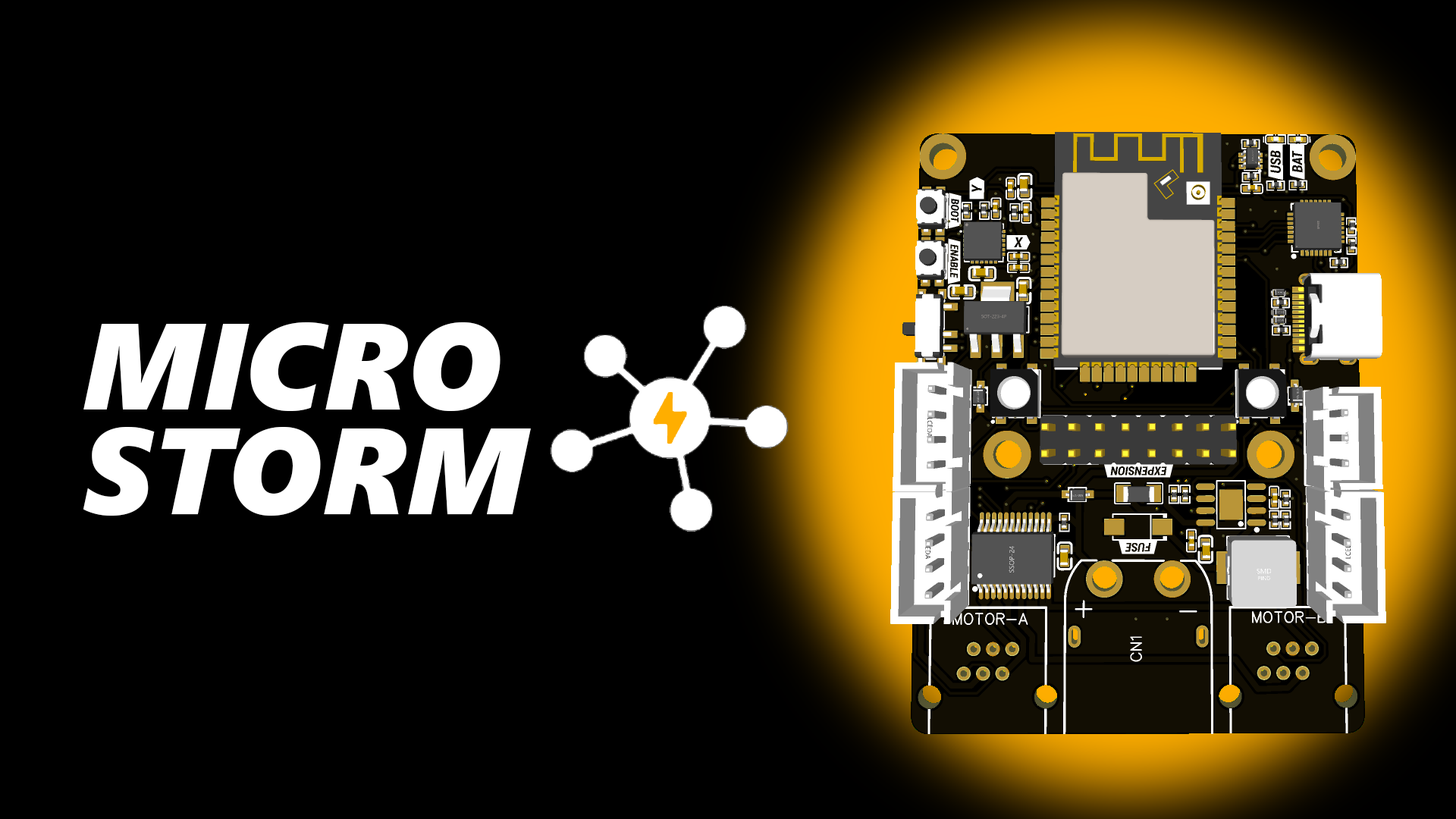
<style>
.page{position:relative;width:1456px;height:819px;background:#000000}
.page>*{position:absolute;margin:0}
.t1{font:123.2px/104.3px "SegoeUIBlack-Italic";color:#ffffff}
</style>
<div class="page">
<p class="t1" style="left:83px;top:322px;width:448px;height:194px">MICRO<br>STORM</p>
</div>
